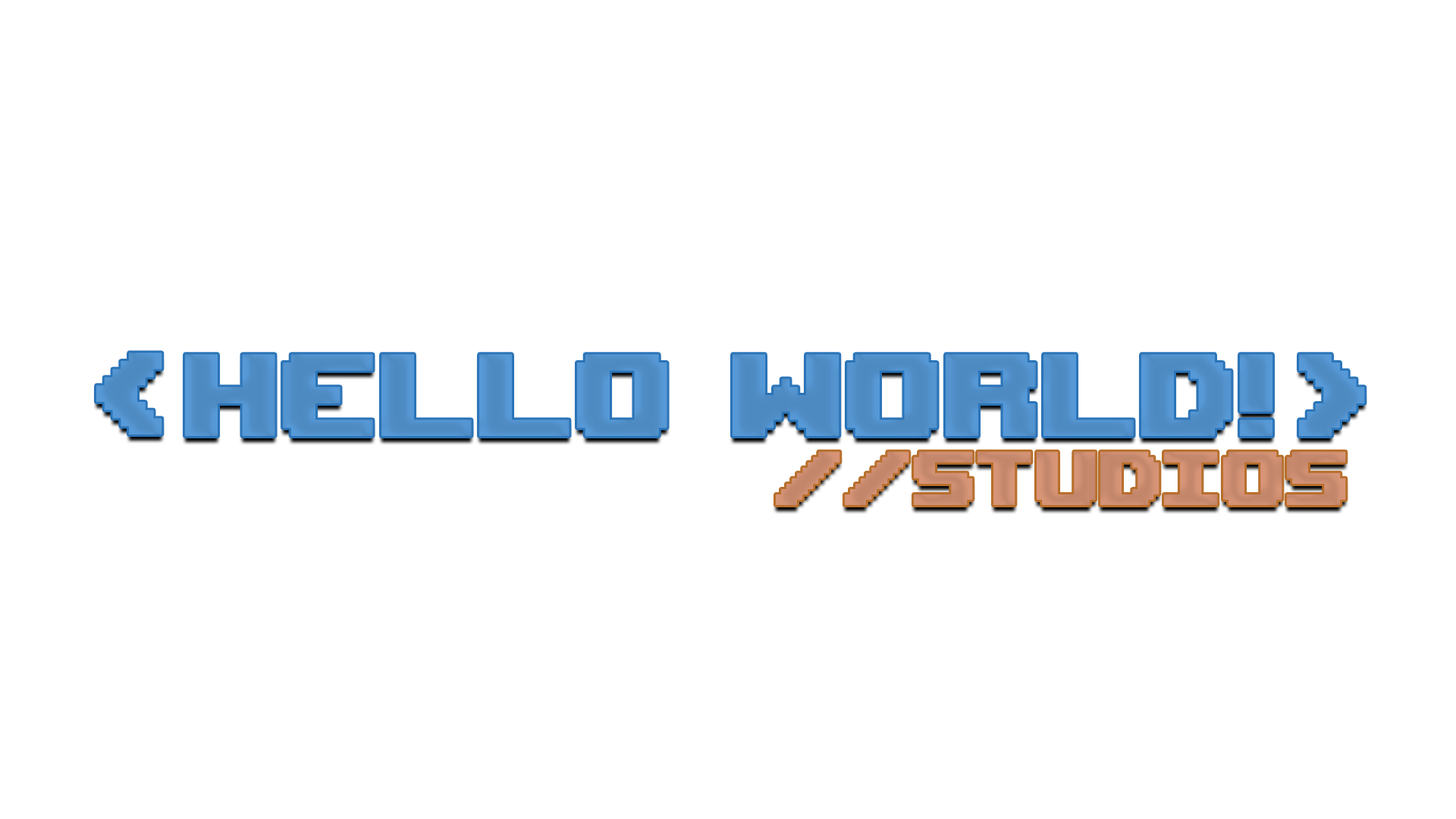
<style>
.page{position:relative;width:1456px;height:819px;background:#ffffff}
.page>*{position:absolute;margin:0}
.t1{font:174.4px "Upheaval -BRK-";color:#579ad8}
.t2{font:113.7px "Upheaval -BRK-";color:#d89577}
</style>
<div class="page">
<p class="t1" style="left:96px;top:353px;width:66px;height:82px">&lt;</p>
<p class="t1" style="left:185px;top:354px;width:1087px;height:82px">hello world!</p>
<p class="t1" style="left:1299px;top:354px;width:66px;height:82px">&gt;</p>
<p class="t2" style="left:776px;top:451px;width:133px;height:54px">//</p>
</div>
